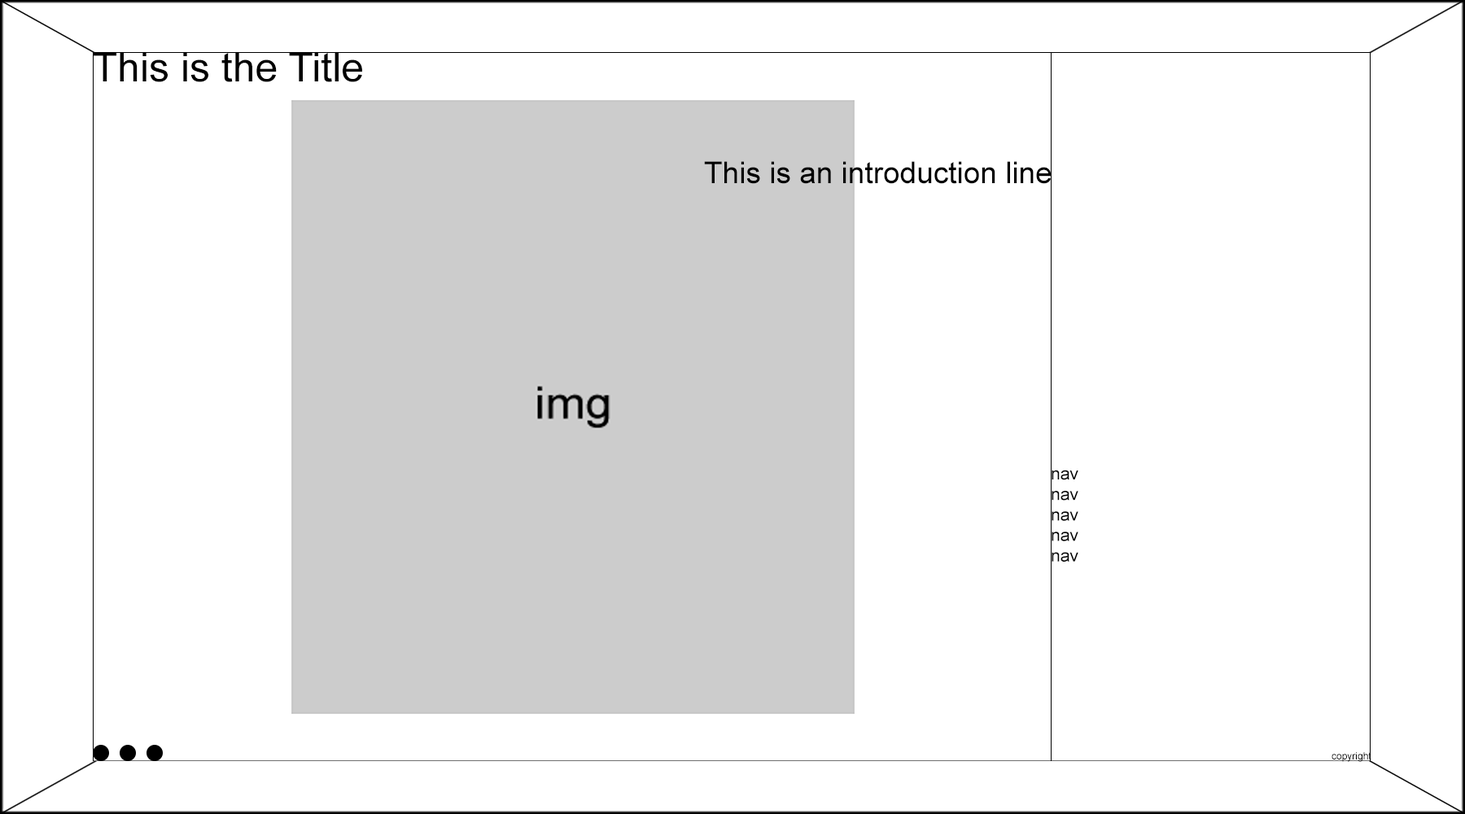
<style>
.page{position:relative;width:1465px;height:814px;background:#ffffff}
.page>*{position:absolute;margin:0}
.t1{font:40.7px "ArialMT";color:#000000}
.t2{font:30.1px "ArialMT";color:#000000}
.t3{font:17.1px "ArialMT";color:#000000}
.t4{font:9.8px "ArialMT";color:#000000}
</style>
<div class="page">
<p class="t1" style="left:93px;top:52px;width:269px;height:30px">This is the Title</p>
<p class="t2" style="left:704px;top:161px;width:348px;height:23px">This is an introduction line</p>
<p class="t3" style="left:1052px;top:470px;width:26px;height:92px">nav<br>nav<br>nav<br>nav<br>nav</p>
<p class="t4" style="left:1332px;top:752px;width:39px;height:10px">copyright</p>
</div>
